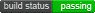
<style>
.page{position:relative;width:95px;height:13px}
.page>*{position:absolute;margin:0}
.t1{font:10px "ArialMT";color:#cccccc;scale:0.9 1}
.t2{font:10px "ArialMT";color:#ffffff;scale:0.9 1}
</style>
<div class="page">
<p class="t1" style="left:4px;top:2px;width:46px;height:7px">build status</p>
<p class="t2" style="left:61px;top:2px;width:31px;height:9px">passing</p>
</div>
